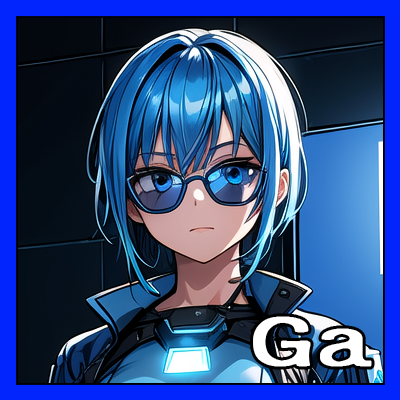
<style>
.page{position:relative;width:400px;height:400px}
.page>*{position:absolute;margin:0}
.t1{font:74.2px "YetR-HM";color:#ffffff;font-weight:bold;scale:1.33 1}
</style>
<div class="page">
<p class="t1" style="left:251px;top:315px;width:122px;height:53px">Ga</p>
</div>
